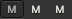
<style>
.page{position:relative;width:72px;height:19px;background:#333333}
.page>*{position:absolute;margin:0}
.t1{font:10px "HelveticaNeueLTStd-Roman";letter-spacing:0.2em;color:#adacac}
.t2{font:10px "HelveticaNeueLTStd-Roman";letter-spacing:0.2em;color:#e5e2db}
</style>
<div class="page">
<p class="t1" style="left:8px;top:5px;width:8px;height:8px">M</p>
<p class="t2" style="left:32px;top:5px;width:8px;height:8px">M</p>
<p class="t2" style="left:56px;top:5px;width:8px;height:8px">M</p>
</div>
